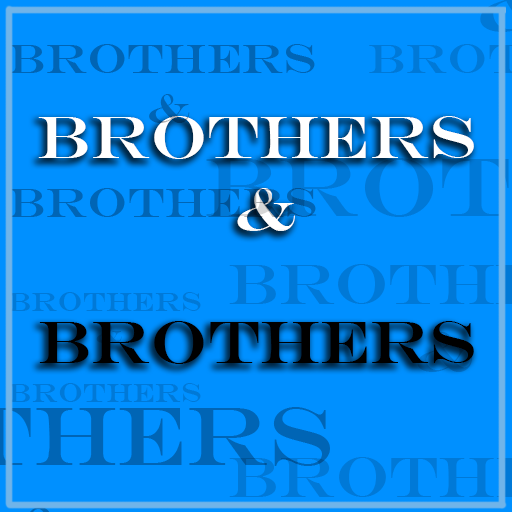
<style>
.page{position:relative;width:512px;height:512px;background:#0090ff}
.page>*{position:absolute;margin:0}
.t1{font:42.3px "EngraversMT";color:#0065b5}
.t2{font:60px "EngraversMT"}
</style>
<div class="page">
<p class="t1" style="left:9px;top:44px;width:307px;height:173px;text-align:center">Brothers <br>&amp;<br>Brothers</p>
<p class="t1" style="left:9px;top:44px;width:307px;height:173px;text-align:center">Brothers <br>&amp;<br>Brothers</p>
<p class="t2" style="left:38px;top:116px;width:436px;height:248px;text-align:center">Brothers <br>&amp;<br>Brothers</p>
</div>
